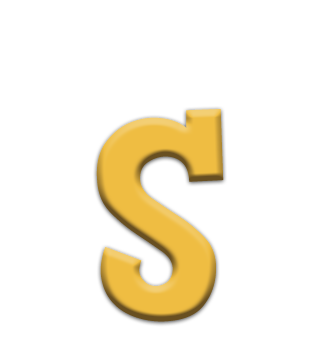
<style>
.page{position:relative;width:320px;height:352px;background:#ffffff}
.page>*{position:absolute;margin:0}
.t1{font:422px "FinkHeavy";color:#efbd42}
</style>
<div class="page">
<p class="t1" style="left:96px;top:109px;width:128px;height:213px">s</p>
</div>
